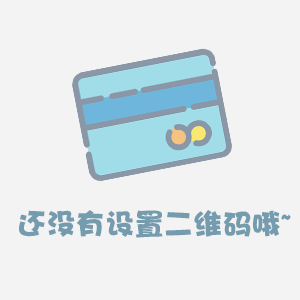
<style>
.page{position:relative;width:300px;height:300px;background:#f3f3f3}
.page>*{position:absolute;margin:0}
.t1{font:29.3px "DFPHaiBaoW12";color:#759aae}
</style>
<div class="page">
<p class="t1" style="left:19px;top:210px;width:272px;height:28px">还没有设置二维码哦~</p>
</div>
